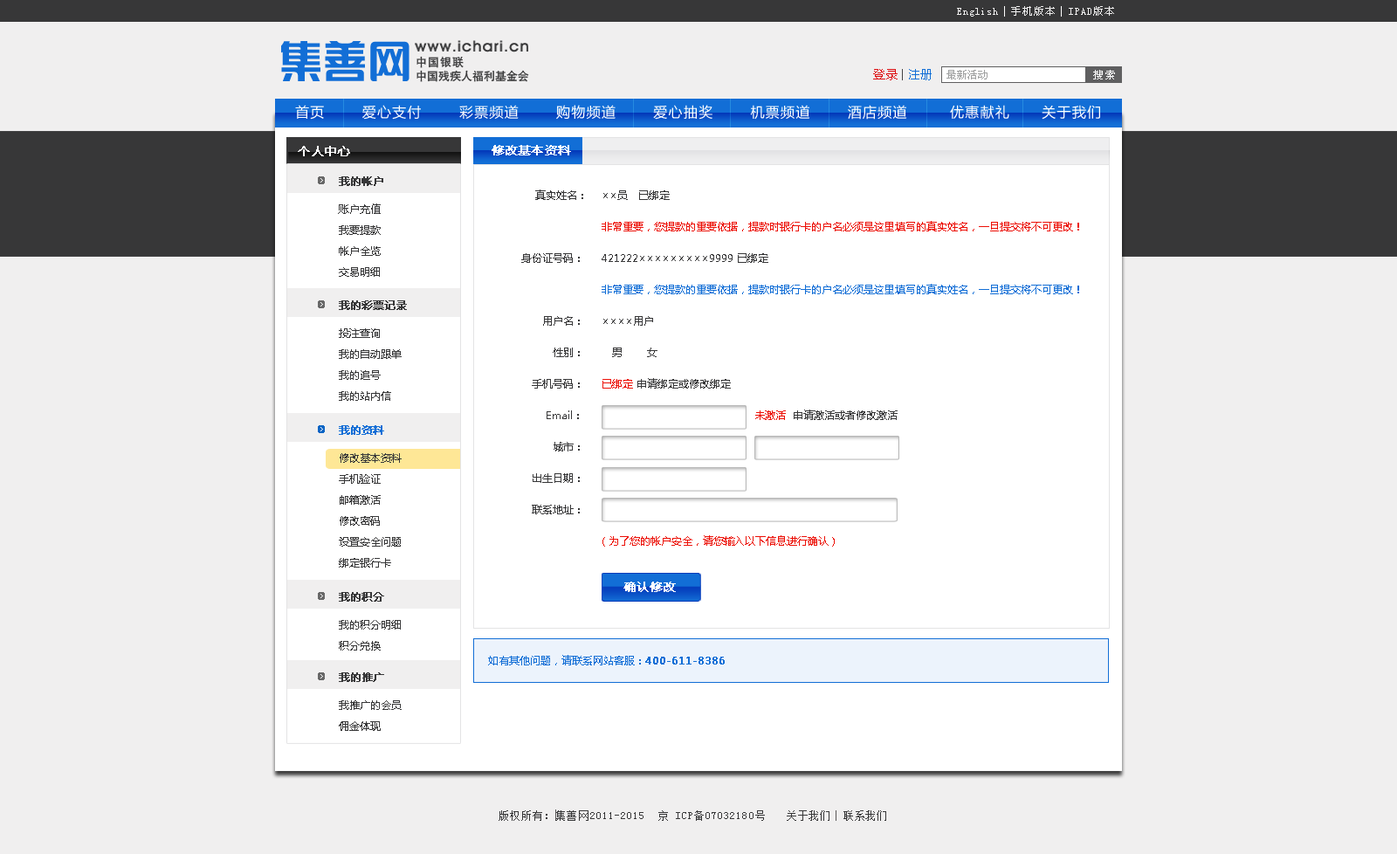
<style>
.page{position:relative;width:1397px;height:854px;background:#f0efef}
.page>*{position:absolute;margin:0}
.t1{font:10.5px "SimSun";letter-spacing:0.09em;color:#f0efef}
.t2{font:10.5px "SimSun";letter-spacing:0.07em;color:#f0efef}
.t3{font:11.3px "HeitiCSEG-Medium-GB";letter-spacing:0.08em;color:#373738}
.t4{font:11.3px "HeitiCSEG-Medium-GB";color:#373738}
.t5{font:12.2px "FZLTXHK--GBK1-0";letter-spacing:0.01em;color:#dd0a0d}
.t6{font:11.3px "FZLTXHK--GBK1-0";letter-spacing:0.01em;color:#434344}
.t7{font:12.2px "FZLTXHK--GBK1-0";letter-spacing:0.01em;color:#126ed6}
.t8{font:10.5px "SimSun";color:#9fa0a0}
.t9{font:10.5px "SimSun";letter-spacing:0.16em;color:#ffffff}
.t10{font:14px "MicrosoftYaHei";letter-spacing:0.08em;color:#ffffff}
.t11{font:12.2px "MicrosoftYaHei";color:#ffffff;font-weight:bold}
.t12{font:12.2px "MicrosoftYaHei";letter-spacing:0.01em;color:#ffffff;font-weight:bold}
.t13{font:10.5px "MicrosoftYaHei";color:#373738;font-weight:bold}
.t14{font:10.5px/31.4px "MicrosoftYaHei";color:#373738}
.t15{font:10.5px/31.4px "MicrosoftYaHei";color:#ec1006}
.t16{font:10.5px/31.4px "MicrosoftYaHei";color:#126ed6}
.t17{font:10.5px/21px "MicrosoftYaHei";color:#373738}
.t18{font:10.5px "MicrosoftYaHei";color:#126ed6;font-weight:bold}
.t19{font:10.5px "MicrosoftYaHei";color:#126ed6}
.t20{font:10.5px "SimSun";letter-spacing:0.09em;color:#373738}
.t21{font:10.5px "SimSun";letter-spacing:0.07em;color:#373738}
</style>
<div class="page">
<p class="t1" style="left:957px;top:6px;width:157px;height:11px"><span class="t2">English  </span>手机版本  IPAD版本</p>
<p class="t3" style="left:416px;top:56px;width:48px;height:12px">中国银联</p>
<p class="t4" style="left:416px;top:70px;width:113px;height:12px">中国残疾人福利基金会</p>
<p class="t5" style="left:873px;top:69px;width:58px;height:11px">登录 <span class="t6">| </span><span class="t7">注册</span></p>
<p class="t8" style="left:946px;top:70px;width:41px;height:9px">最新活动</p>
<p class="t9" style="left:1093px;top:70px;width:22px;height:9px">搜索</p>
<p class="t10" style="left:295px;top:105px;width:805px;height:15px">首页       爱心支付       彩票频道       购物频道       爱心抽奖       机票频道       酒店频道        优惠献礼      关于我们</p>
<p class="t11" style="left:298px;top:146px;width:52px;height:10px">个人中心</p>
<p class="t12" style="left:491px;top:145px;width:80px;height:10px">修改基本资料</p>
<p class="t13" style="left:339px;top:176px;width:44px;height:10px">我的帐户</p>
<p class="t14" style="left:521px;top:189px;width:558px;height:357px">真实姓名：    ××员   已绑定<br>         <span class="t15">非常重要，您提款的重要依据，提款时银行卡的户名必须是这里填写的真实姓名，一旦提交将不可更改！<br></span>  身份证号码：     421222×××××××××9999 已绑定<br>         <span class="t16">非常重要，您提款的重要依据，提款时银行卡的户名必须是这里填写的真实姓名，一旦提交将不可更改！<br></span>        用户名：     ××××用户<br>           性别：        男       女<br>     手机号码：     <span class="t15">已绑定</span> 申请绑定或修改绑定<br>         Email：                                                 <span class="t15">未激活</span>  申请激活或者修改激活<br>           城市：      <br>     出生日期：<br>     联系地址：<br>        <span class="t15">（为了您的帐户安全，请您输入以下信息进行确认）</span></p>
<p class="t17" style="left:338px;top:203px;width:43px;height:74px">账户充值<br>我要提款 <br>帐户全览 <br>交易明细</p>
<p class="t13" style="left:339px;top:300px;width:68px;height:10px">我的彩票记录</p>
<p class="t17" style="left:339px;top:328px;width:63px;height:73px">投注查询<br>我的自动跟单<br>我的追号<br>我的站内信</p>
<p class="t18" style="left:339px;top:425px;width:45px;height:10px">我的资料</p>
<p class="t17" style="left:339px;top:453px;width:63px;height:114px">修改基本资料<br>手机验证<br>邮箱激活<br>修改密码<br>设置安全问题<br>绑定银行卡</p>
<p class="t11" style="left:623px;top:581px;width:53px;height:11px">确认修改</p>
<p class="t13" style="left:339px;top:592px;width:45px;height:9px">我的积分</p>
<p class="t17" style="left:339px;top:620px;width:62px;height:30px">我的积分明细<br>积分兑换</p>
<p class="t19" style="left:488px;top:655px;width:237px;height:10px">如有其他问题，请联系网站客服：<span class="t18">400-611-8386</span></p>
<p class="t13" style="left:339px;top:672px;width:45px;height:10px">我的推广</p>
<p class="t17" style="left:339px;top:700px;width:63px;height:31px">我推广的会员<br>佣金体现</p>
<p class="t20" style="left:498px;top:810px;width:267px;height:11px">版权所有：集善网2011-2015  京 ICP备07032180号</p>
<p class="t21" style="left:787px;top:810px;width:99px;height:11px">关于我们  联系我们</p>
</div>
